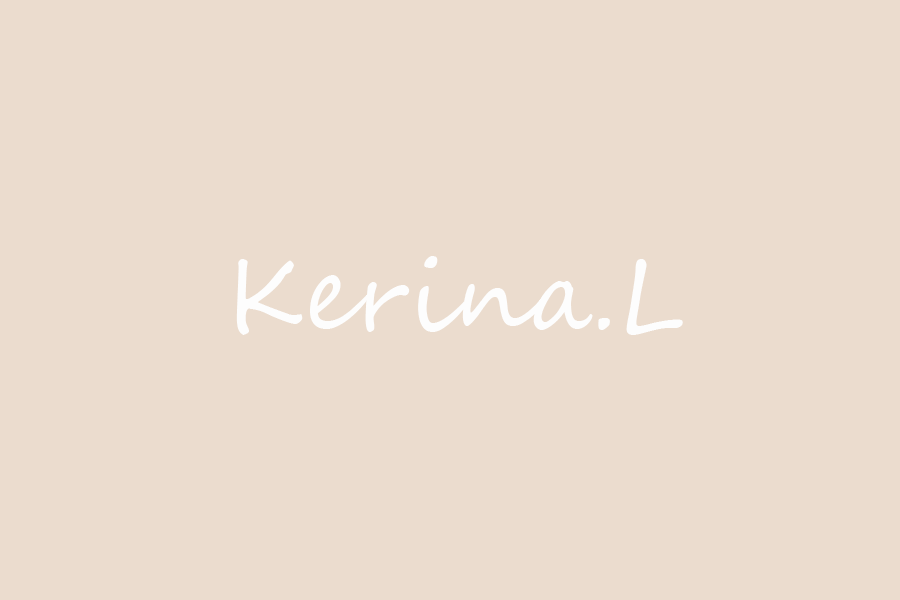
<style>
.page{position:relative;width:900px;height:600px;background:#ebdcce}
.page>*{position:absolute;margin:0}
.t1{font:100px "SegoeScript";color:#fdfdfd}
</style>
<div class="page">
<p class="t1" style="left:236px;top:256px;width:447px;height:79px">Kerina.L</p>
</div>
